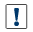
<style>
.page{position:relative;width:33px;height:32px;background:#ffffff}
.page>*{position:absolute;margin:0}
.t1{font:26px "Minion-Bold";letter-spacing:0.05em;color:#00386b;font-weight:bold}
</style>
<div class="page">
<p class="t1" style="left:14px;top:8px;width:5px;height:18px">!</p>
</div>
